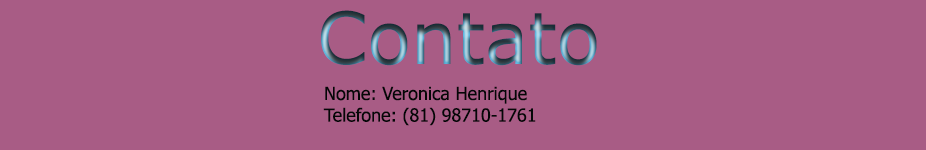
<style>
.page{position:relative;width:926px;height:150px;background:#a85c85}
.page>*{position:absolute;margin:0}
.t1{font:72px "Verdana"}
.t2{font:18px "Tahoma";color:#040607}
</style>
<div class="page">
<p class="t1" style="left:321px;top:10px;width:276px;height:56px">Contato</p>
<p class="t2" style="left:323px;top:86px;width:213px;height:40px">Nome: Veronica Henrique<br>Telefone: (81) 98710-1761</p>
</div>
